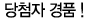
<style>
.page{position:relative;width:86px;height:20px;background:#ffffff}
.page>*{position:absolute;margin:0}
.t1{font:17px "YDIYGO330";letter-spacing:-0.05em;color:#000000;scale:0.91 1}
</style>
<div class="page">
<p class="t1" style="left:5px;top:2px;width:79px;height:16px">당첨자 경품 !</p>
</div>
